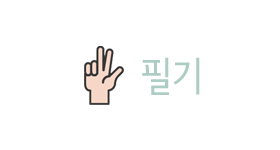
<style>
.page{position:relative;width:280px;height:150px;background:#ffffff}
.page>*{position:absolute;margin:0}
.t1{font:40px "SeN-CM";color:#acccc4}
</style>
<div class="page">
<p class="t1" style="left:142px;top:57px;width:58px;height:38px">필기</p>
</div>
